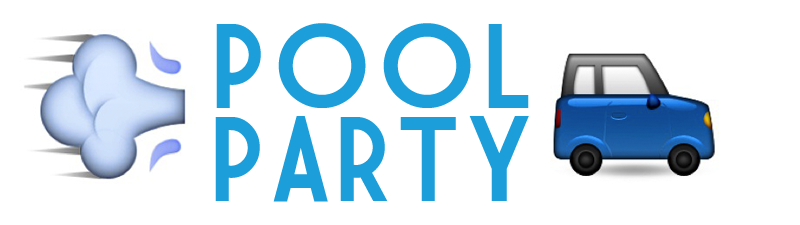
<style>
.page{position:relative;width:800px;height:225px;background:#ffffff}
.page>*{position:absolute;margin:0}
.t1{font:117.1px/93.7px "MarketDeco";color:#1c9eda}
.t2{font:117.1px/93.7px "MarketDeco";letter-spacing:0.04em;color:#1c9eda}
</style>
<div class="page">
<p class="t1" style="left:215px;top:23px;width:314px;height:179px;text-align:center"><span class="t2">POOL<br></span>PARTY</p>
</div>
